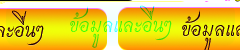
<style>
.page{position:relative;width:240px;height:50px}
.page>*{position:absolute;margin:0}
.t1{font:28px "THCharmonman"}
</style>
<div class="page">
<p class="t1" style="left:70px;top:5px;width:102px;height:43px">ข้อมูลและอื่นๆ</p>
</div>
